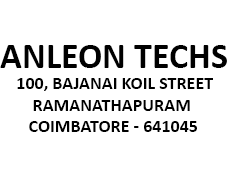
<style>
.page{position:relative;width:235px;height:188px;background:#ffffff}
.page>*{position:absolute;margin:0}
.t1{font:18px "Calibri-Bold";color:#000000}
.t2{font:36px "Calibri-Bold";color:#000000}
</style>
<div class="page">
<p class="t1" style="left:0px;top:45px;width:227px;height:87px"><span class="t2"><br>ANLEON TECHS<br></span>    100, BAJANAI KOIL STREET<br>        RAMANATHAPURAM<br>       COIMBATORE - 641045</p>
</div>
